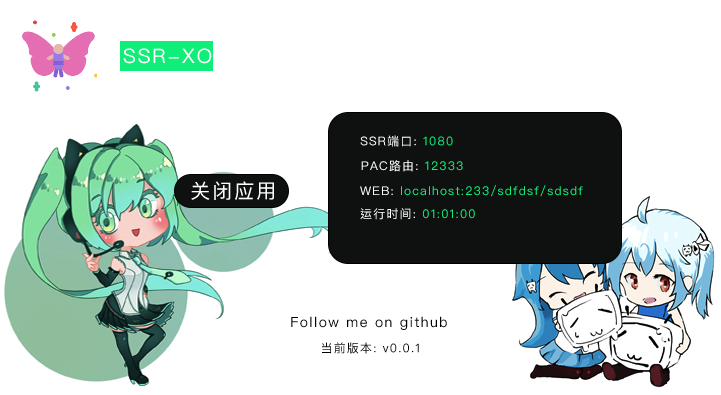
<style>
.page{position:relative;width:721px;height:395px;background:#ffffff}
.page>*{position:absolute;margin:0}
.t1{font:20px "PingFangTC-Regular";letter-spacing:0.1em;color:#ffffff}
.t2{font:12px "PingFangTC-Regular";letter-spacing:0.1em;color:#ffffff}
.t3{font:12px "PingFangTC-Regular";letter-spacing:0.1em;color:#10ed78}
.t4{font:14px "PingFangTC-Regular";letter-spacing:0.1em;color:#000000}
.t5{font:12px "PingFangTC-Regular";letter-spacing:0.1em;color:#000000}
</style>
<div class="page">
<p class="t1" style="left:123px;top:48px;width:89px;height:16px">SSR-XO</p>
<p class="t2" style="left:360px;top:135px;width:93px;height:12px">SSR端口: <span class="t3">1080</span></p>
<p class="t2" style="left:361px;top:160px;width:102px;height:12px">PAC路由: <span class="t3">12333</span></p>
<p class="t1" style="left:191px;top:181px;width:83px;height:19px">关闭应用</p>
<p class="t3" style="left:360px;top:185px;width:223px;height:12px"><span class="t2">WEB: </span>localhost:233/sdfdsf/sdsdf</p>
<p class="t3" style="left:360px;top:208px;width:115px;height:12px"><span class="t2">运行时间: </span>01:01:00</p>
<p class="t4" style="left:291px;top:316px;width:156px;height:14px">Follow me on github</p>
<p class="t5" style="left:322px;top:342px;width:97px;height:12px">当前版本: v0.0.1</p>
</div>
